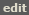
<style>
.page{position:relative;width:29px;height:15px;background:#5a5a5a}
.page>*{position:absolute;margin:0}
.t1{font:11px "Verdana-Bold";color:#dedbcb}
</style>
<div class="page">
<p class="t1" style="left:3px;top:3px;width:24px;height:9px">edit</p>
</div>
